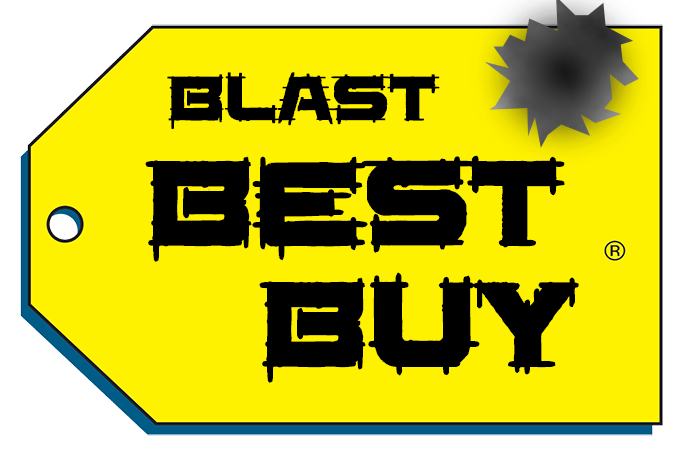
<style>
.page{position:relative;width:680px;height:457px;background:#fff200}
.page>*{position:absolute;margin:0}
.t1{font:72px "SaucerBB";color:#000000;font-weight:bold}
.t2{font:135.5px "SaucerBB";color:#000000;font-weight:bold}
</style>
<div class="page">
<p class="t1" style="left:167px;top:72px;width:273px;height:57px">Blast</p>
<p class="t2" style="left:145px;top:155px;width:420px;height:107px">Best</p>
<p class="t2" style="left:259px;top:272px;width:320px;height:111px">Buy</p>
</div>
